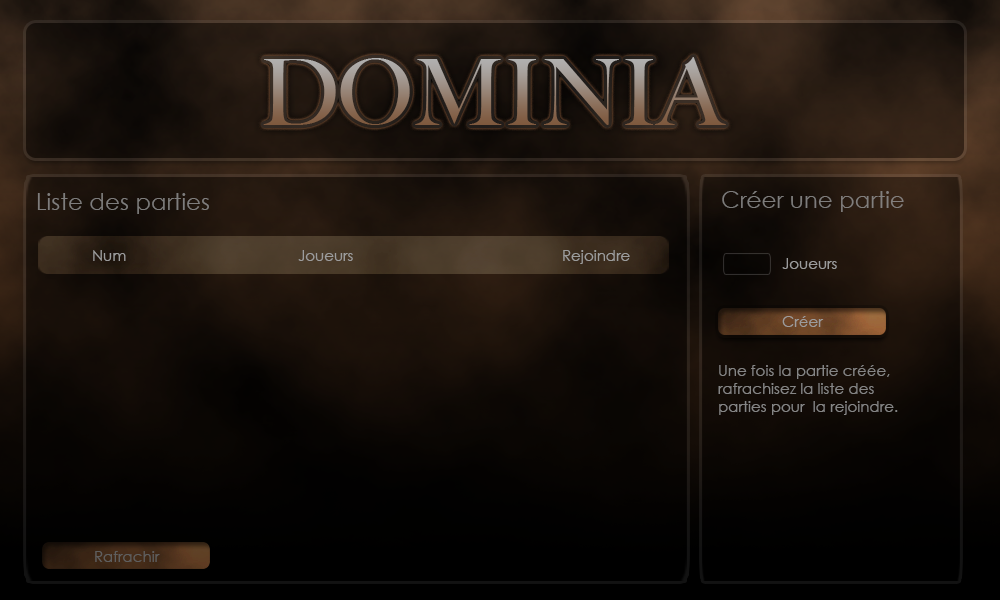
<style>
.page{position:relative;width:1000px;height:600px}
.page>*{position:absolute;margin:0}
.t1{font:92px "BigCaslon-Medium"}
.t2{font:23px "CenturyGothic";color:#7e7d7c}
.t3{font:15px "CenturyGothic";color:#9c9c9c}
.t4{font:15px "CenturyGothic";color:#858585}
</style>
<div class="page">
<p class="t1" style="left:263px;top:57px;width:463px;height:68px">DOMINIA</p>
<p class="t2" style="left:37px;top:193px;width:172px;height:21px">Liste des parties</p>
<p class="t2" style="left:722px;top:191px;width:182px;height:21px">Créer une partie</p>
<p class="t3" style="left:93px;top:250px;width:33px;height:11px">Num</p>
<p class="t3" style="left:298px;top:250px;width:55px;height:11px">Joueurs</p>
<p class="t3" style="left:563px;top:250px;width:67px;height:14px">Rejoindre</p>
<p class="t3" style="left:782px;top:258px;width:55px;height:11px">Joueurs</p>
<p class="t3" style="left:782px;top:316px;width:42px;height:11px">Créer</p>
<p class="t4" style="left:718px;top:365px;width:180px;height:50px">Une fois la partie créée, rafrachisez la liste des parties pour  la rejoindre.</p>
</div>
